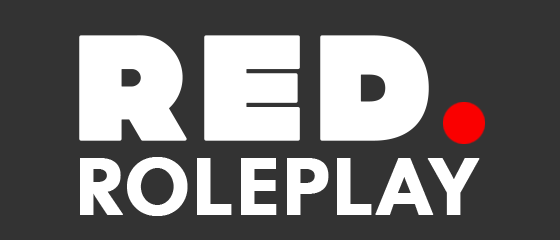
<style>
.page{position:relative;width:560px;height:240px;background:#333333}
.page>*{position:absolute;margin:0}
.t1{font:148.5px "AironeDemo";letter-spacing:0.05em;color:#ffffff;text-transform:uppercase;font-weight:bold}
.t2{font:80.3px "CalSans-Regular";letter-spacing:0.05em;color:#ffffff;text-transform:uppercase;font-weight:bold}
</style>
<div class="page">
<p class="t1" style="left:79px;top:35px;width:350px;height:106px">RED</p>
<p class="t2" style="left:80px;top:157px;width:400px;height:59px">Roleplay</p>
</div>
